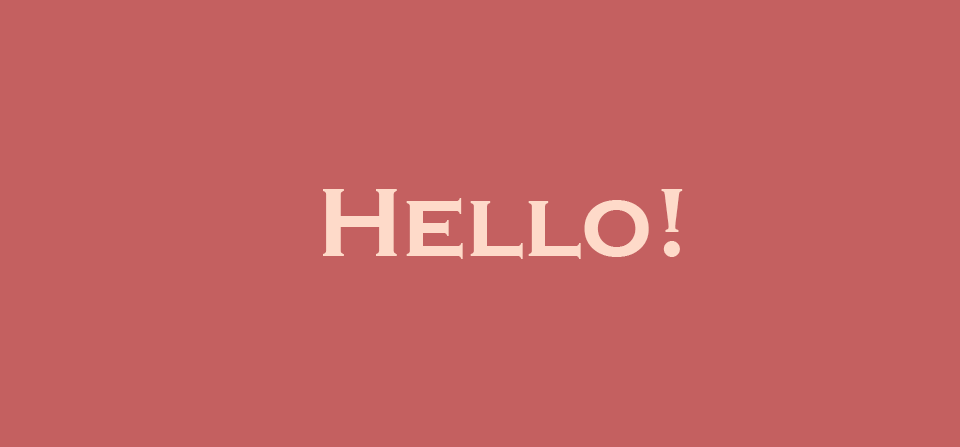
<style>
.page{position:relative;width:960px;height:447px;background:#c46060}
.page>*{position:absolute;margin:0}
.t1{font:100px "CopperplateGothic-Bold";color:#fedac9}
</style>
<div class="page">
<p class="t1" style="left:323px;top:189px;width:360px;height:70px">Hello!</p>
</div>
